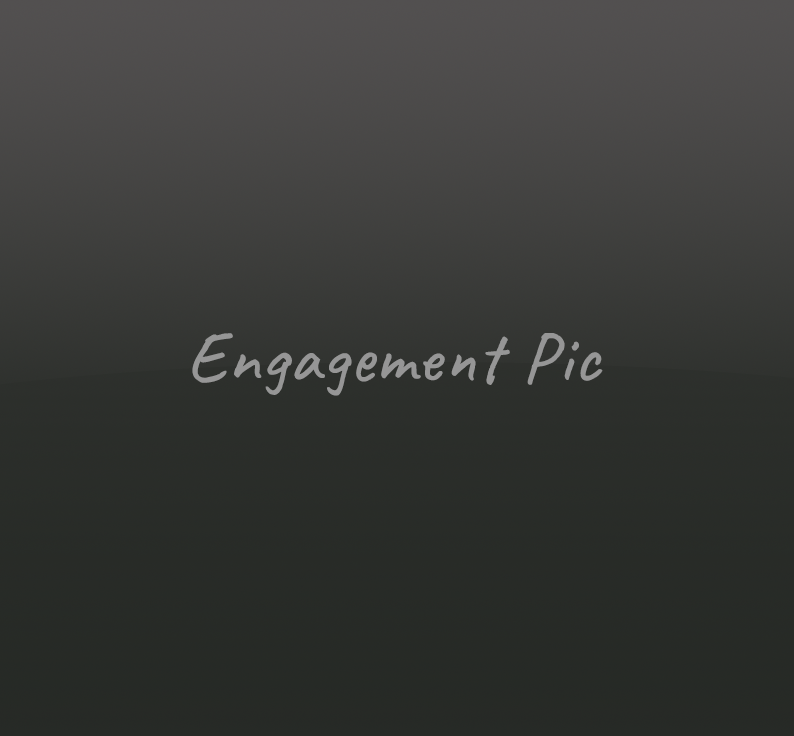
<style>
.page{position:relative;width:794px;height:736px}
.page>*{position:absolute;margin:0}
.t1{font:72px "Caveat-Regular";color:#969696;font-weight:bold}
</style>
<div class="page">
<p class="t1" style="left:192px;top:333px;width:411px;height:63px">Engagement Pic</p>
</div>
